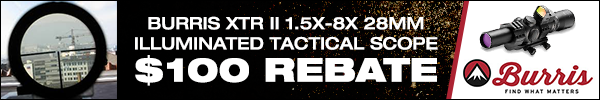
<style>
.page{position:relative;width:600px;height:100px;background:#ffffff}
.page>*{position:absolute;margin:0}
.t1{font:16.8px "HelveticaNeueLTStd-MdEx";color:#ffffff}
.t2{font:33.2px "HelveticaNeueLTStd-BlkEx";color:#ffffff}
</style>
<div class="page">
<p class="t1" style="left:135px;top:16px;width:303px;height:34px;text-align:center">BURRIS XTR II 1.5X-8X 28MM<br>ILLUMINATED TACTICAL SCOPE</p>
<p class="t2" style="left:135px;top:55px;width:302px;height:31px">$100 REBATE</p>
</div>
